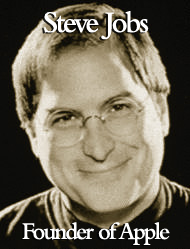
<style>
.page{position:relative;width:190px;height:249px}
.page>*{position:absolute;margin:0}
.t1{font:31.2px "BemboMT-SemiBold";letter-spacing:-0.08em;color:#ffffff;scale:0.95 1}
.t2{font:25px "BemboMT-SemiBold";letter-spacing:-0.08em;color:#ffffff;scale:0.95 1}
</style>
<div class="page">
<p class="t1" style="left:44px;top:11px;width:105px;height:29px">Steve Jobs</p>
<p class="t2" style="left:22px;top:222px;width:148px;height:23px">Founder of Apple</p>
</div>
